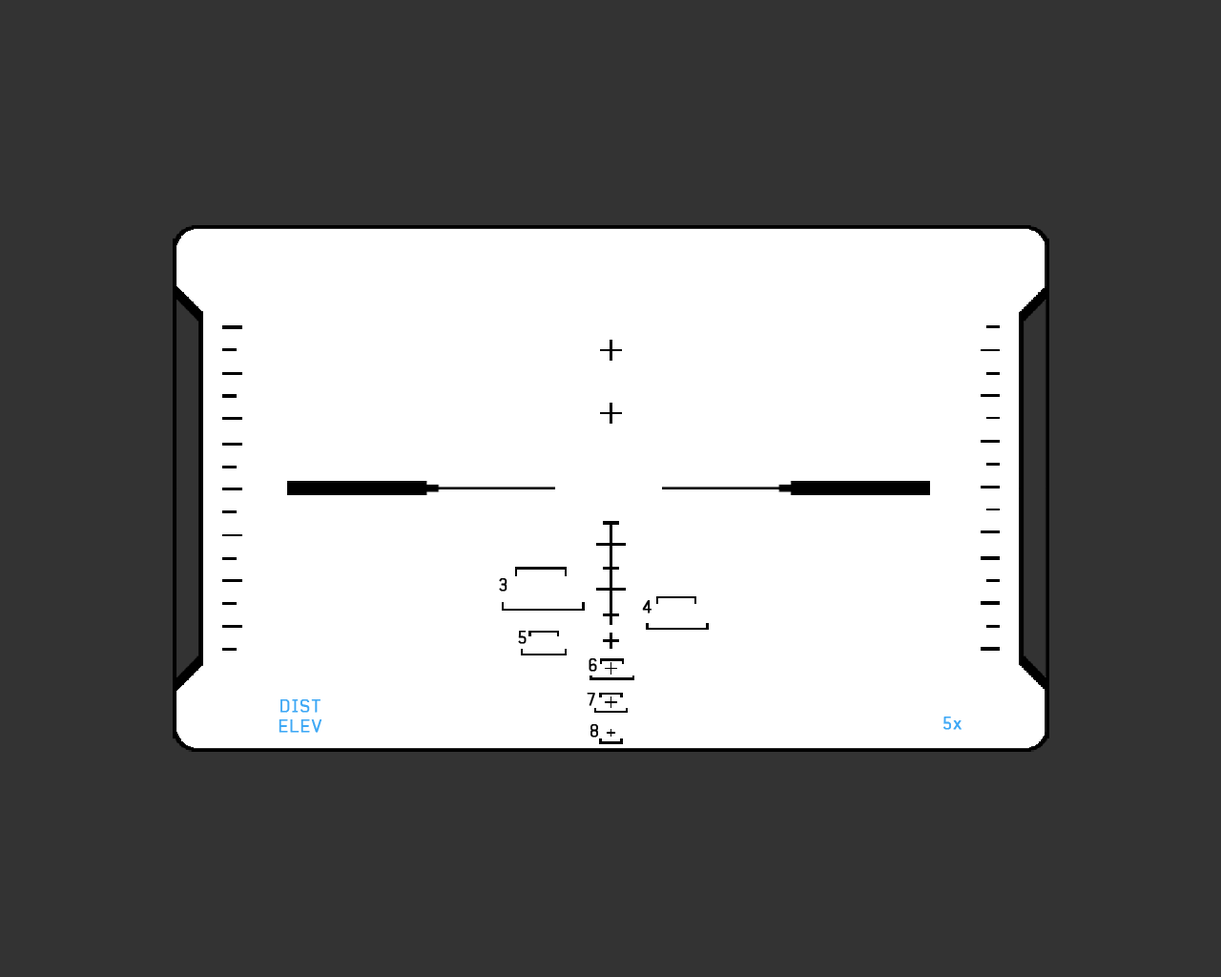
<style>
.page{position:relative;width:1221px;height:977px;background:#333333}
.page>*{position:absolute;margin:0}
.t1{font:16.8px "Baksheesh";letter-spacing:0.08em;color:#000000;font-weight:bold}
.t2{font:17px/20.3px "Baksheesh";letter-spacing:0.08em;color:#3ea8f5;font-weight:bold}
.t3{font:17px "Baksheesh";letter-spacing:0.08em;color:#3ea8f5;font-weight:bold}
</style>
<div class="page">
<p class="t1" style="left:499px;top:578px;width:8px;height:13px">3</p>
<p class="t1" style="left:642px;top:600px;width:9px;height:13px">4</p>
<p class="t1" style="left:518px;top:630px;width:9px;height:14px">5</p>
<p class="t1" style="left:589px;top:658px;width:8px;height:13px">6</p>
<p class="t2" style="left:279px;top:699px;width:43px;height:34px;text-align:center">DIST<br>ELEV</p>
<p class="t1" style="left:587px;top:692px;width:8px;height:14px">7</p>
<p class="t1" style="left:590px;top:724px;width:8px;height:13px">8</p>
<p class="t3" style="left:943px;top:716px;width:18px;height:14px">5x</p>
</div>
